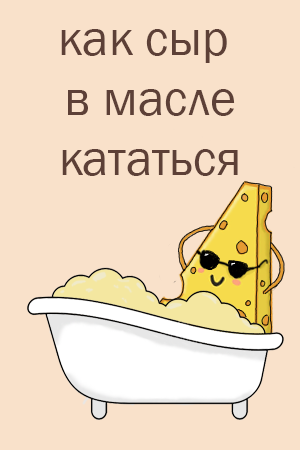
<style>
.page{position:relative;width:300px;height:450px;background:#f9e1ca}
.page>*{position:absolute;margin:0}
.t1{font:50px "FranklinGothic-Book";color:#5d4037}
</style>
<div class="page">
<p class="t1" style="left:61px;top:29px;width:177px;height:147px;text-align:center">как сыр <br>в масле<br>кататься</p>
</div>
